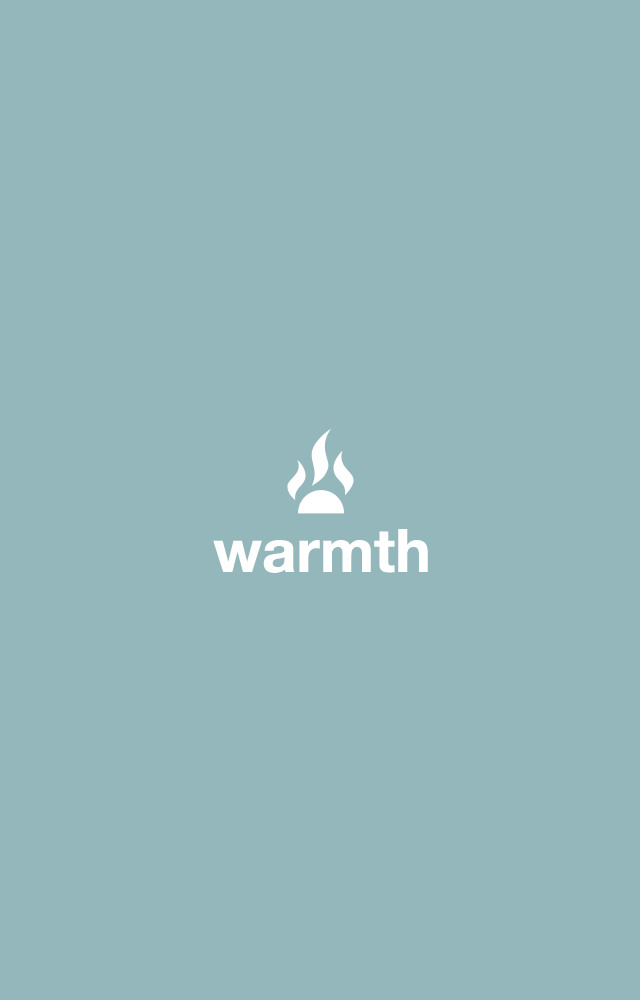
<style>
.page{position:relative;width:640px;height:1000px;background:#94b7bb}
.page>*{position:absolute;margin:0}
.t1{font:60px "HelveticaNeue-Bold";color:#ffffff}
</style>
<div class="page">
<p class="t1" style="left:213px;top:529px;width:215px;height:44px">warmth</p>
</div>
